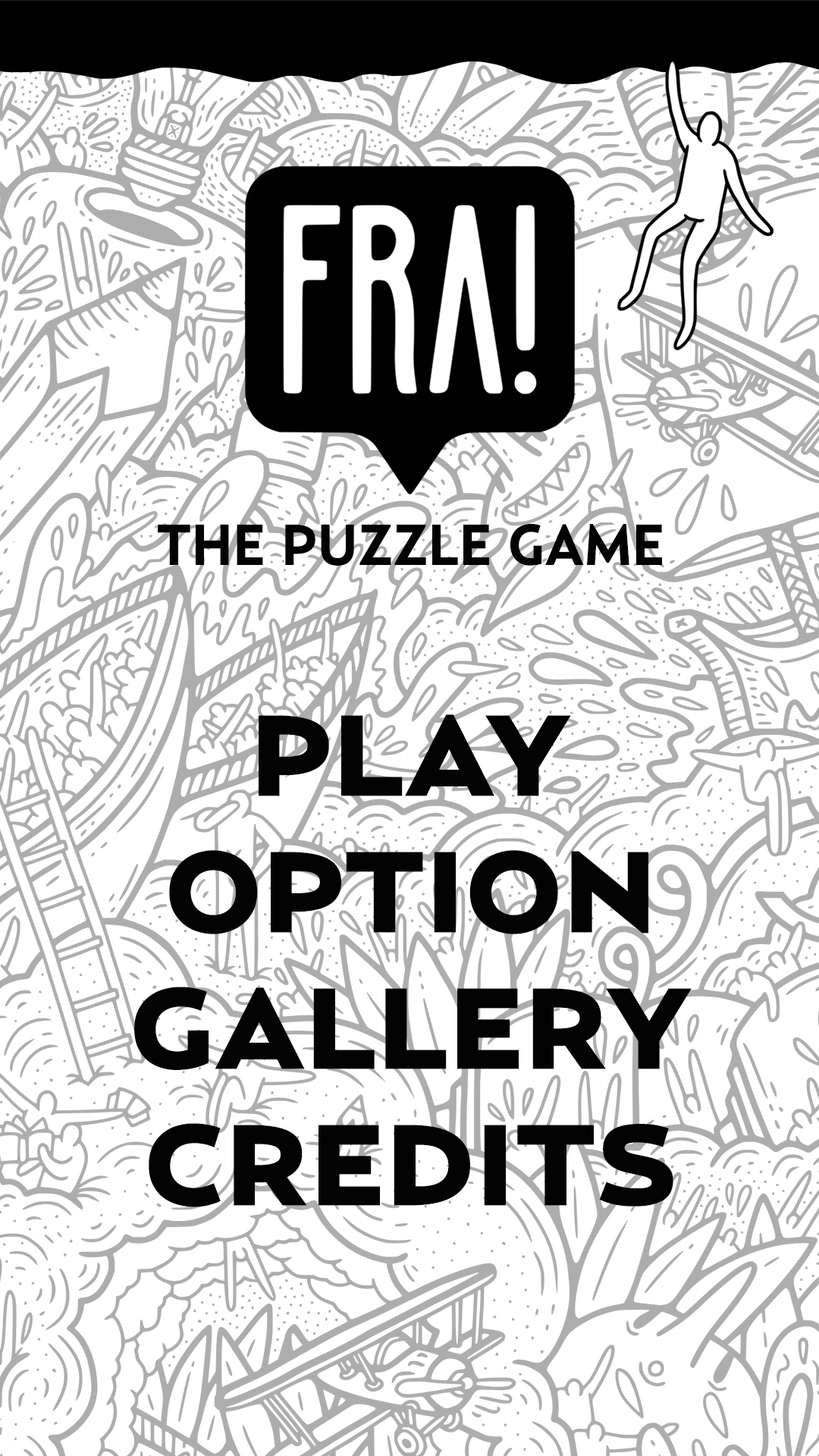
<style>
.page{position:relative;width:819px;height:1456px;background:#ffffff}
.page>*{position:absolute;margin:0}
.t1{font:56.9px "Relay-Bold";color:#030303}
.t2{font:113.7px "RelayWide-Black";color:#030303}
</style>
<div class="page">
<p class="t1" style="left:158px;top:523px;width:504px;height:43px">THE PUZZLE GAME</p>
<p class="t2" style="left:134px;top:714px;width:558px;height:493px;text-align:center">PLAY<br>OPTION<br>GALLERY<br>CREDITS</p>
</div>
